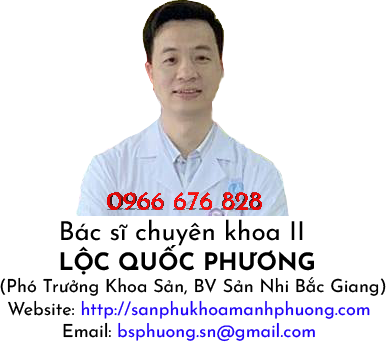
<style>
.page{position:relative;width:386px;height:342px;background:#ffffff}
.page>*{position:absolute;margin:0}
.t1{font:26px "JosefinSans-Regular";color:#000000}
.t2{font:24px "JosefinSans-Bold";color:#000000}
.t3{font:18px "JosefinSans-Regular";color:#000000}
.t4{font:18px "JosefinSans-Regular";color:#2104f8}
</style>
<div class="page">
<p class="t1" style="left:61px;top:219px;width:242px;height:27px">Bác sĩ chuyên khoa II</p>
<p class="t2" style="left:60px;top:245px;width:254px;height:30px">LỘC QUỐC PHƯƠNG</p>
<p class="t3" style="left:0px;top:277px;width:386px;height:19px">(Phó Trưởng Khoa Sản, BV Sản Nhi Bắc Giang)</p>
<p class="t4" style="left:8px;top:300px;width:362px;height:19px"><span class="t3">Website: </span>http://sanphukhoamanhphuong.com</p>
<p class="t4" style="left:63px;top:322px;width:252px;height:20px"><span class="t3">Email: </span>bsphuong.sn@gmail.com</p>
</div>
